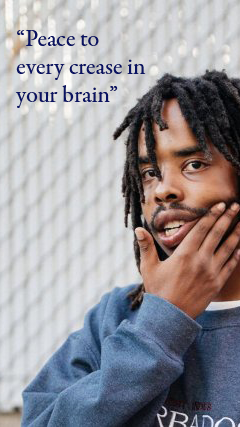
<style>
.page{position:relative;width:240px;height:427px}
.page>*{position:absolute;margin:0}
.t1{font:24px/28px "GaramondPremrPro";color:#0a1362}
</style>
<div class="page">
<p class="t1" style="left:15px;top:30px;width:131px;height:78px">“Peace to every crease in your brain”</p>
</div>
